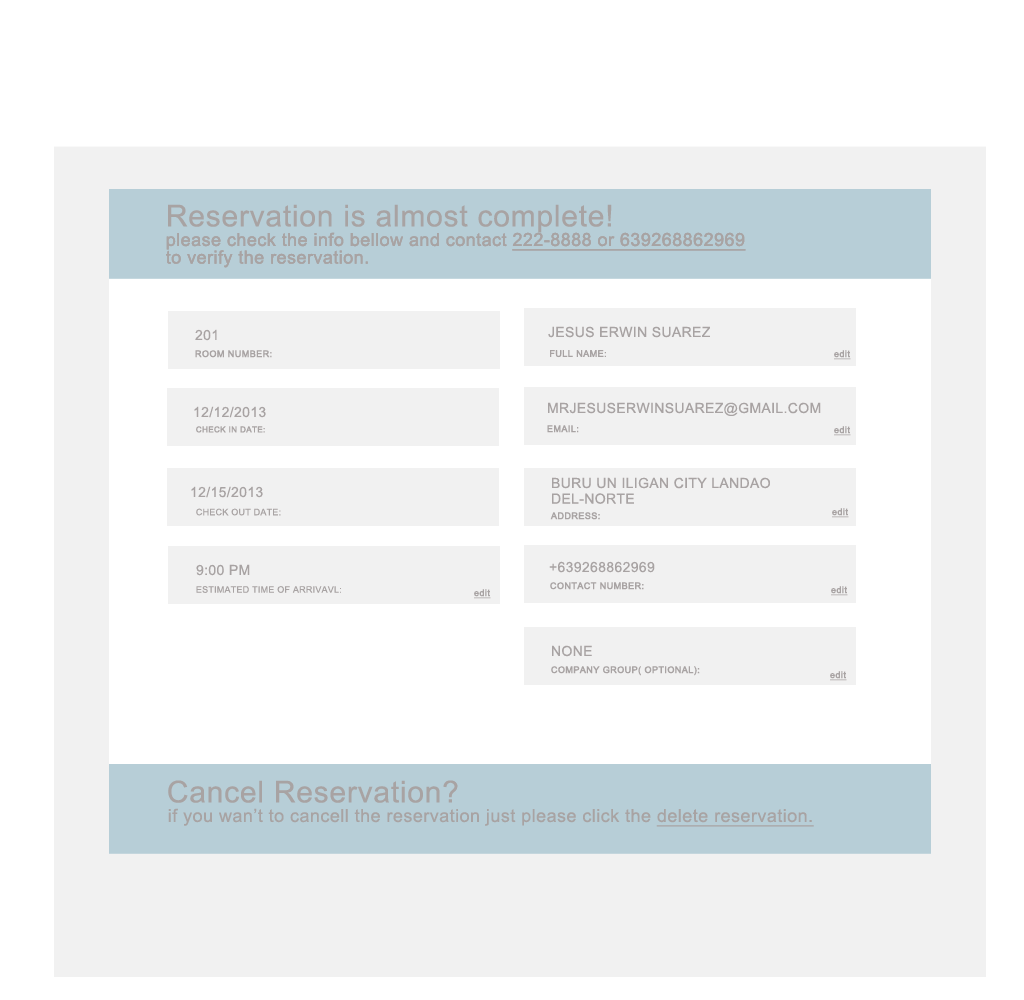
<style>
.page{position:relative;width:1024px;height:1000px;background:#ffffff}
.page>*{position:absolute;margin:0}
.t1{font:30px "ArialMT";letter-spacing:0.025em;color:#a8a3a3}
.t2{font:18px/17.6px "ArialMT";letter-spacing:0.025em;color:#a8a3a3}
.t3{font:18px/17.6px "ArialMT";letter-spacing:0.025em;color:#a8a3a3;text-decoration:underline}
.t4{font:14px "ArialMT";letter-spacing:0.025em;color:#a8a3a3}
.t5{font:9px "ArialMT";letter-spacing:0.025em;color:#a8a3a3;font-weight:bold}
.t6{font:9px "ArialMT";letter-spacing:0.025em;color:#a8a3a3;font-weight:bold;text-decoration:underline}
.t7{font:8px "ArialMT";letter-spacing:0.025em;color:#a8a3a3;font-weight:bold}
.t8{font:14px/15.6px "ArialMT";letter-spacing:0.025em;color:#a8a3a3}
.t9{font:9px "ArialMT";letter-spacing:0.025em;color:#a8a3a3}
.t10{font:18px "ArialMT";letter-spacing:0.025em;color:#a8a3a3}
.t11{font:18px "ArialMT";letter-spacing:0.025em;color:#a8a3a3;text-decoration:underline}
</style>
<div class="page">
<p class="t1" style="left:168px;top:204px;width:444px;height:29px">Reservation is almost complete!</p>
<p class="t2" style="left:166px;top:232px;width:580px;height:36px">please check the info bellow and contact <span class="t3">222-8888 or 639268862969<br></span>to verify the reservation.</p>
<p class="t2" style="left:166px;top:232px;width:580px;height:36px">please check the info bellow and contact <span class="t3">222-8888 or 639268862969<br></span>to verify the reservation.</p>
<p class="t4" style="left:195px;top:329px;width:22px;height:12px">201</p>
<p class="t4" style="left:548px;top:326px;width:162px;height:12px">JESUS ERWIN SUAREZ</p>
<p class="t5" style="left:195px;top:350px;width:77px;height:8px">ROOM NUMBER:</p>
<p class="t5" style="left:550px;top:350px;width:56px;height:8px">FULL NAME:</p>
<p class="t6" style="left:834px;top:350px;width:17px;height:10px">edit</p>
<p class="t4" style="left:194px;top:406px;width:72px;height:12px">12/12/2013</p>
<p class="t4" style="left:548px;top:402px;width:273px;height:14px">MRJESUSERWINSUAREZ@GMAIL.COM</p>
<p class="t5" style="left:547px;top:425px;width:32px;height:8px">EMAIL:</p>
<p class="t7" style="left:196px;top:426px;width:69px;height:7px">CHECK IN DATE:</p>
<p class="t6" style="left:834px;top:426px;width:17px;height:10px">edit</p>
<p class="t4" style="left:191px;top:486px;width:72px;height:12px">12/15/2013</p>
<p class="t8" style="left:552px;top:477px;width:218px;height:27px">BURU UN ILIGAN CITY LANDAO <br>DEL-NORTE</p>
<p class="t9" style="left:196px;top:508px;width:85px;height:8px">CHECK OUT DATE:</p>
<p class="t6" style="left:832px;top:508px;width:17px;height:10px">edit</p>
<p class="t5" style="left:550px;top:512px;width:50px;height:8px">ADDRESS:</p>
<p class="t4" style="left:196px;top:564px;width:54px;height:12px">9:00 PM</p>
<p class="t4" style="left:549px;top:561px;width:106px;height:12px">+639268862969</p>
<p class="t5" style="left:550px;top:582px;width:94px;height:8px">CONTACT NUMBER:</p>
<p class="t9" style="left:196px;top:586px;width:145px;height:7px">ESTIMATED TIME OF ARRIVAVL:</p>
<p class="t6" style="left:474px;top:589px;width:17px;height:10px">edit</p>
<p class="t6" style="left:831px;top:586px;width:17px;height:10px">edit</p>
<p class="t4" style="left:552px;top:645px;width:40px;height:12px">NONE</p>
<p class="t5" style="left:551px;top:666px;width:149px;height:10px">COMPANY GROUP( OPTIONAL):</p>
<p class="t6" style="left:830px;top:671px;width:17px;height:10px">edit</p>
<p class="t1" style="left:168px;top:780px;width:290px;height:23px">Cancel Reservation?</p>
<p class="t10" style="left:168px;top:808px;width:646px;height:19px">if you wan’t to cancell the reservation just please click the <span class="t11">delete reservation.</span></p>
</div>
